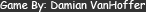
<style>
.page{position:relative;width:146px;height:12px;background:#333333}
.page>*{position:absolute;margin:0}
.t1{font:11px "ComicSansMS";color:#ffffff}
</style>
<div class="page">
<p class="t1" style="left:0px;top:0px;width:146px;height:12px">Game By: Damian VanHoffer</p>
</div>
